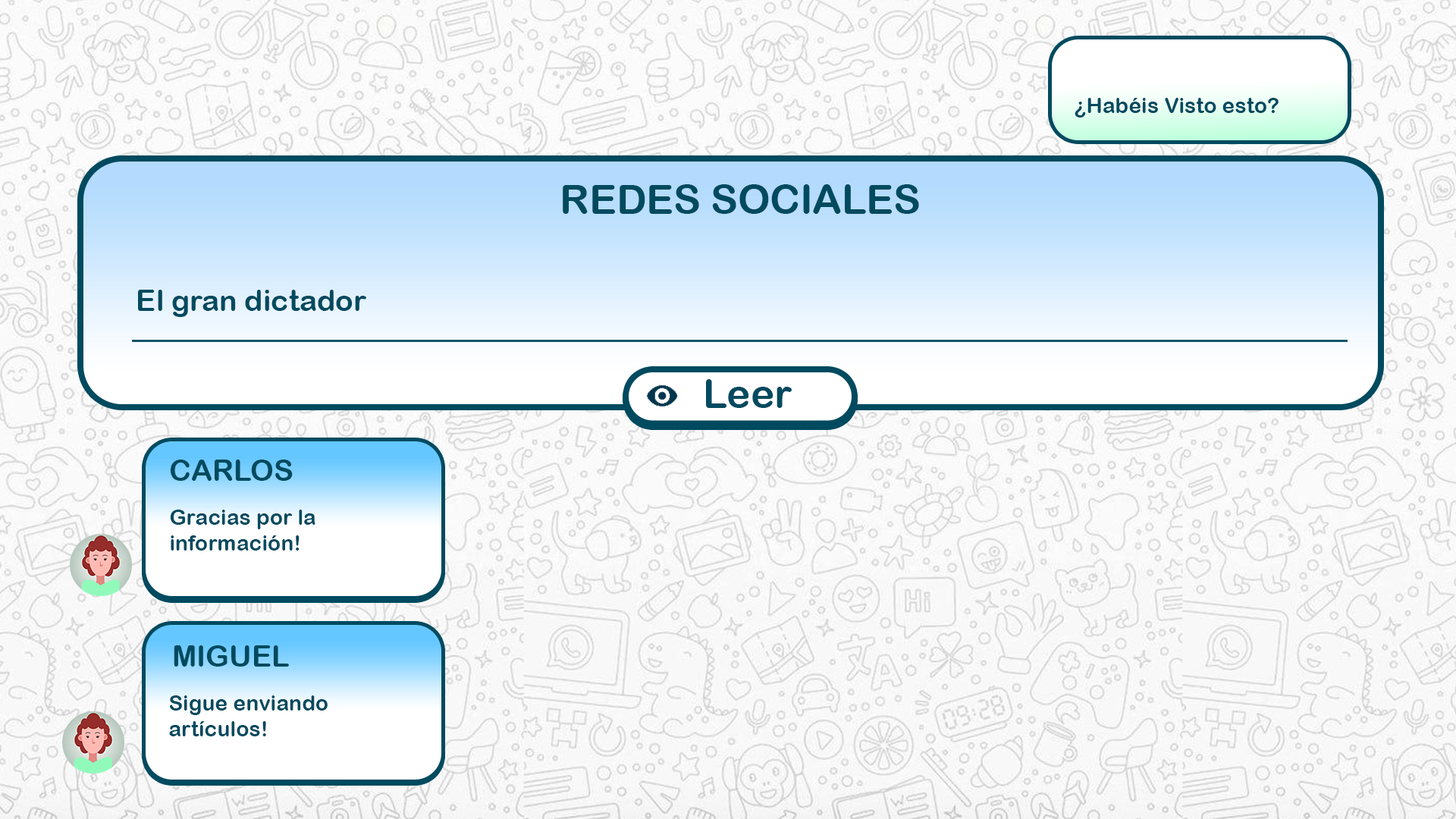
<style>
.page{position:relative;width:1456px;height:819px}
.page>*{position:absolute;margin:0}
.t1{font:21.5px "ArialRoundedMTBold";color:#004a5f}
.t2{font:40.6px "ArialRoundedMTBold";color:#004a5f}
.t3{font:29.6px "ArialRoundedMTBold";color:#004a5f}
.t4{font:39.8px "ArialRoundedMTBold";color:#004a5f}
</style>
<div class="page">
<p class="t1" style="left:1075px;top:98px;width:204px;height:20px">¿Habéis Visto esto?</p>
<p class="t2" style="left:563px;top:184px;width:356px;height:30px">REDES SOCIALES</p>
<p class="t3" style="left:138px;top:290px;width:228px;height:27px">El gran dictador</p>
<p class="t4" style="left:706px;top:379px;width:86px;height:29px">Leer</p>
<p class="t3" style="left:170px;top:460px;width:123px;height:21px">CARLOS</p>
<p class="t1" style="left:170px;top:510px;width:145px;height:41px">Gracias por la<br>información!</p>
<p class="t3" style="left:174px;top:645px;width:115px;height:22px">MIGUEL</p>
<p class="t1" style="left:169px;top:695px;width:159px;height:41px">Sigue enviando <br>artículos!</p>
</div>
